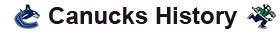
<style>
.page{position:relative;width:280px;height:32px;background:#ffffff}
.page>*{position:absolute;margin:0}
.t1{font:24px "Arial-BoldMT";color:#1c141c}
</style>
<div class="page">
<p class="t1" style="left:49px;top:7px;width:188px;height:22px">Canucks History</p>
</div>
